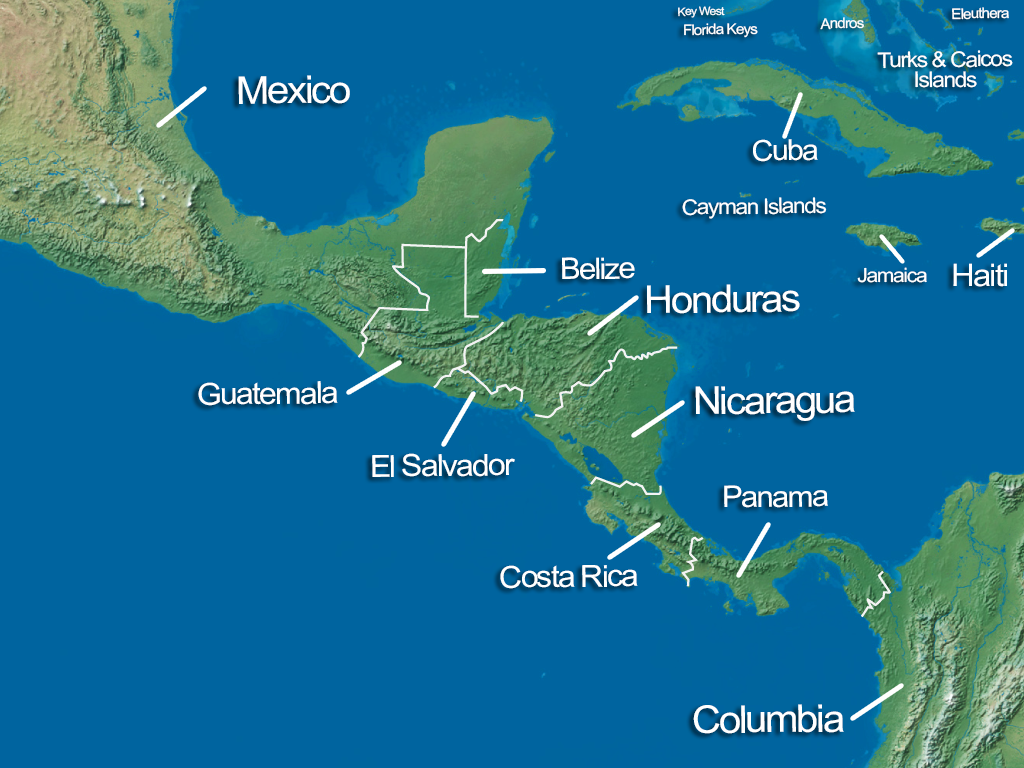
<style>
.page{position:relative;width:1024px;height:768px;background:#00649f}
.page>*{position:absolute;margin:0}
.t1{font:11.6px "ArialMT";letter-spacing:-0.06em;color:#ffffff;scale:1.05 1}
.t2{font:14.5px "ArialMT";letter-spacing:-0.06em;color:#ffffff;scale:1.05 1}
.t3{font:21.6px/20.3px "ArialMT";letter-spacing:-0.06em;color:#ffffff;scale:1.05 1}
.t4{font:38.2px "ArialMT";letter-spacing:-0.06em;color:#ffffff;scale:1.05 1}
.t5{font:29px "ArialMT";letter-spacing:-0.06em;color:#ffffff;scale:1.05 1}
.t6{font:21.6px "ArialMT";letter-spacing:-0.06em;color:#ffffff;scale:1.05 1}
.t7{font:29.6px "ArialMT";letter-spacing:-0.06em;color:#ffffff;scale:1.05 1}
.t8{font:19.8px "ArialMT";letter-spacing:-0.06em;color:#ffffff;scale:1.05 1}
.t9{font:31px "ArialMT";letter-spacing:-0.06em;color:#ffffff;scale:1.05 1}
.t10{font:30.4px "ArialMT";letter-spacing:-0.06em;color:#ffffff;scale:1.05 1}
.t11{font:29.8px "ArialMT";letter-spacing:-0.06em;color:#ffffff;scale:1.05 1}
</style>
<div class="page">
<p class="t1" style="left:678px;top:6px;width:47px;height:12px;rotate:-1deg">Key West</p>
<p class="t2" style="left:820px;top:17px;width:44px;height:13px;rotate:-1deg">Andros</p>
<p class="t2" style="left:952px;top:7px;width:57px;height:13px;rotate:-1deg">Eleuthera</p>
<p class="t2" style="left:684px;top:23px;width:74px;height:15px;rotate:-1deg">Florida Keys</p>
<p class="t3" style="left:877px;top:50px;width:136px;height:38px;text-align:center;rotate:-1deg">Turks &amp; Caicos<br>Islands</p>
<p class="t4" style="left:238px;top:75px;width:112px;height:29px;rotate:-1deg">Mexico</p>
<p class="t5" style="left:753px;top:139px;width:65px;height:23px;rotate:-1deg">Cuba</p>
<p class="t6" style="left:682px;top:197px;width:145px;height:22px;rotate:-1deg">Cayman Islands</p>
<p class="t7" style="left:562px;top:257px;width:73px;height:23px;rotate:-1deg">Belize</p>
<p class="t8" style="left:857px;top:267px;width:70px;height:16px">Jamaica</p>
<p class="t9" style="left:953px;top:263px;width:54px;height:24px">Haiti</p>
<p class="t4" style="left:647px;top:284px;width:153px;height:30px;rotate:-1deg">Honduras</p>
<p class="t10" style="left:198px;top:381px;width:140px;height:25px;rotate:-1deg">Guatemala</p>
<p class="t4" style="left:695px;top:386px;width:160px;height:35px;rotate:-1deg">Nicaragua</p>
<p class="t10" style="left:372px;top:453px;width:143px;height:24px;rotate:-1deg">El Salvador</p>
<p class="t11" style="left:724px;top:485px;width:104px;height:23px;rotate:-1deg">Panama</p>
<p class="t10" style="left:500px;top:565px;width:138px;height:24px;rotate:-1deg">Costa Rica</p>
<p class="t4" style="left:693px;top:704px;width:151px;height:30px;rotate:-1deg">Columbia</p>
</div>
